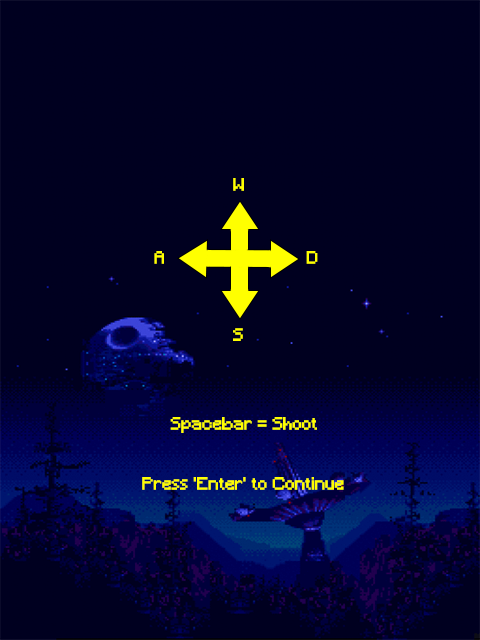
<style>
.page{position:relative;width:480px;height:640px;background:#000020}
.page>*{position:absolute;margin:0}
.t1{font:16.7px "Minecraft";letter-spacing:0.005em;color:#ffff00}
</style>
<div class="page">
<p class="t1" style="left:233px;top:178px;width:11px;height:13px">W</p>
<p class="t1" style="left:154px;top:251px;width:10px;height:13px">A</p>
<p class="t1" style="left:306px;top:251px;width:12px;height:13px">D</p>
<p class="t1" style="left:233px;top:328px;width:10px;height:13px">S</p>
<p class="t1" style="left:170px;top:417px;width:147px;height:16px">Spacebar = Shoot</p>
<p class="t1" style="left:142px;top:477px;width:202px;height:13px">Press 'Enter' to Continue</p>
</div>
